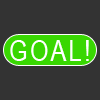
<style>
.page{position:relative;width:100px;height:100px;background:#333333}
.page>*{position:absolute;margin:0}
.t1{font:28.8px "ArialNarrow";letter-spacing:0.08em;color:#ffffff;text-transform:uppercase}
</style>
<div class="page">
<p class="t1" style="left:10px;top:40px;width:79px;height:21px">GOAL!</p>
</div>
